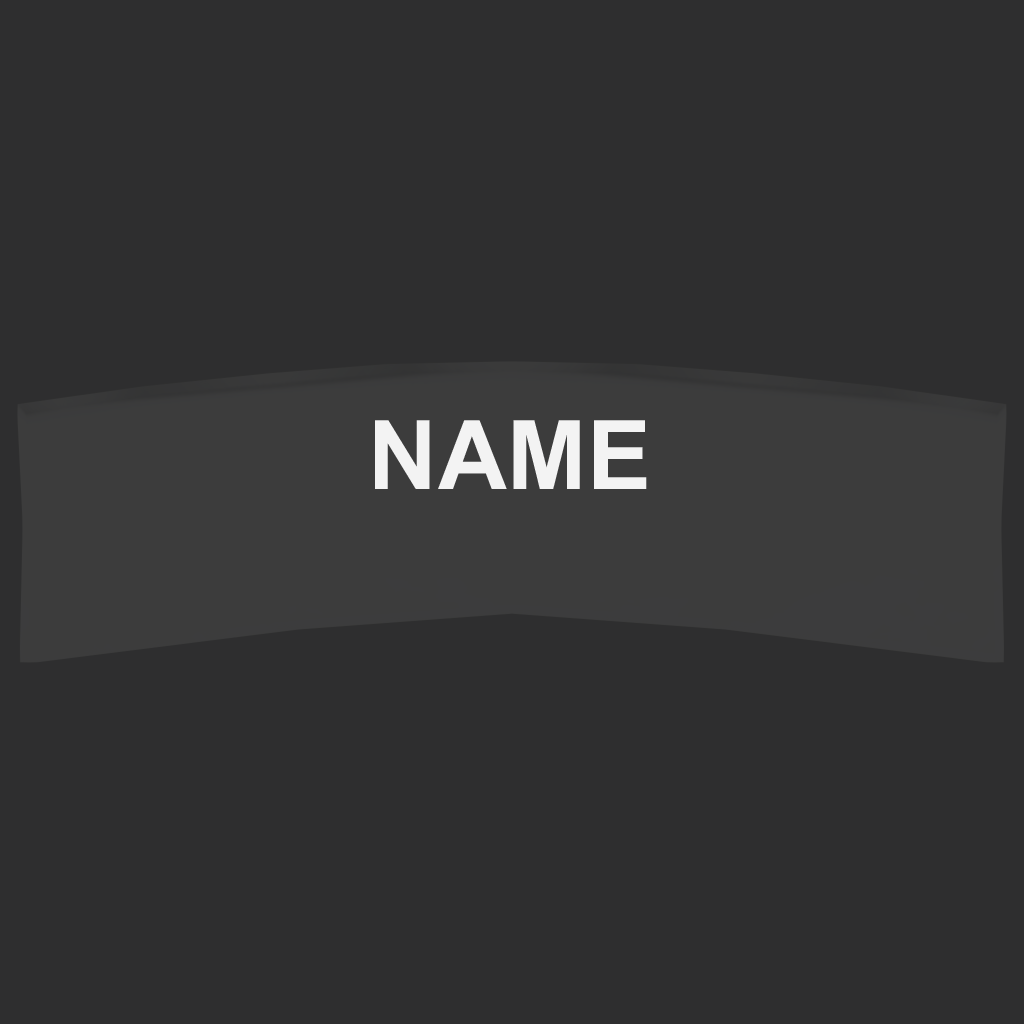
<style>
.page{position:relative;width:1024px;height:1024px;background:#2e2e2f}
.page>*{position:absolute;margin:0}
.t1{font:96px "Arial-BoldMT";color:#ffffff}
</style>
<div class="page">
<p class="t1" style="left:375px;top:420px;width:272px;height:69px">NAME</p>
</div>
